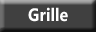
<style>
.page{position:relative;width:96px;height:32px;background:#404040}
.page>*{position:absolute;margin:0}
.t1{font:17.9px "MicrosoftPhagsPa-Bold";color:#ffffff;scale:0.9 1}
</style>
<div class="page">
<p class="t1" style="left:28px;top:7px;width:40px;height:15px">Grille</p>
</div>
